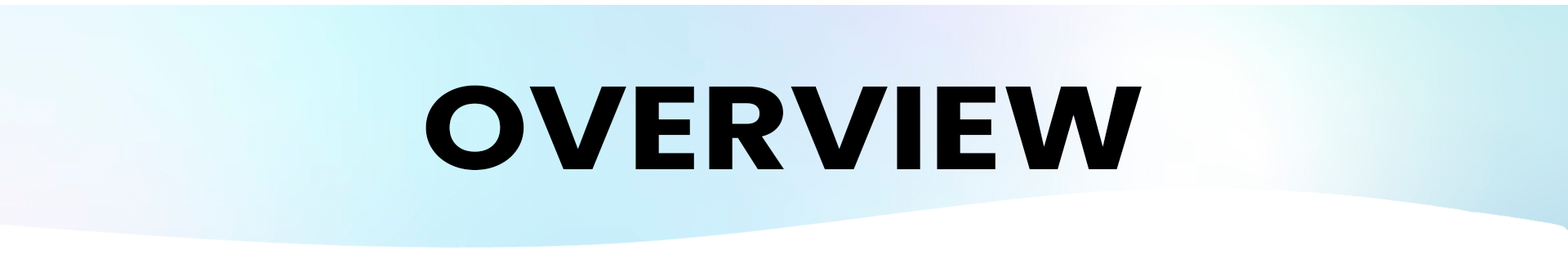
<style>
.page{position:relative;width:1568px;height:255px}
.page>*{position:absolute;margin:0}
.t1{font:117.6px "Poppins-Bold";color:#000000;scale:1.16 1}
</style>
<div class="page">
<p class="t1" style="left:425px;top:85px;width:717px;height:86px">OVERVIEW</p>
</div>
